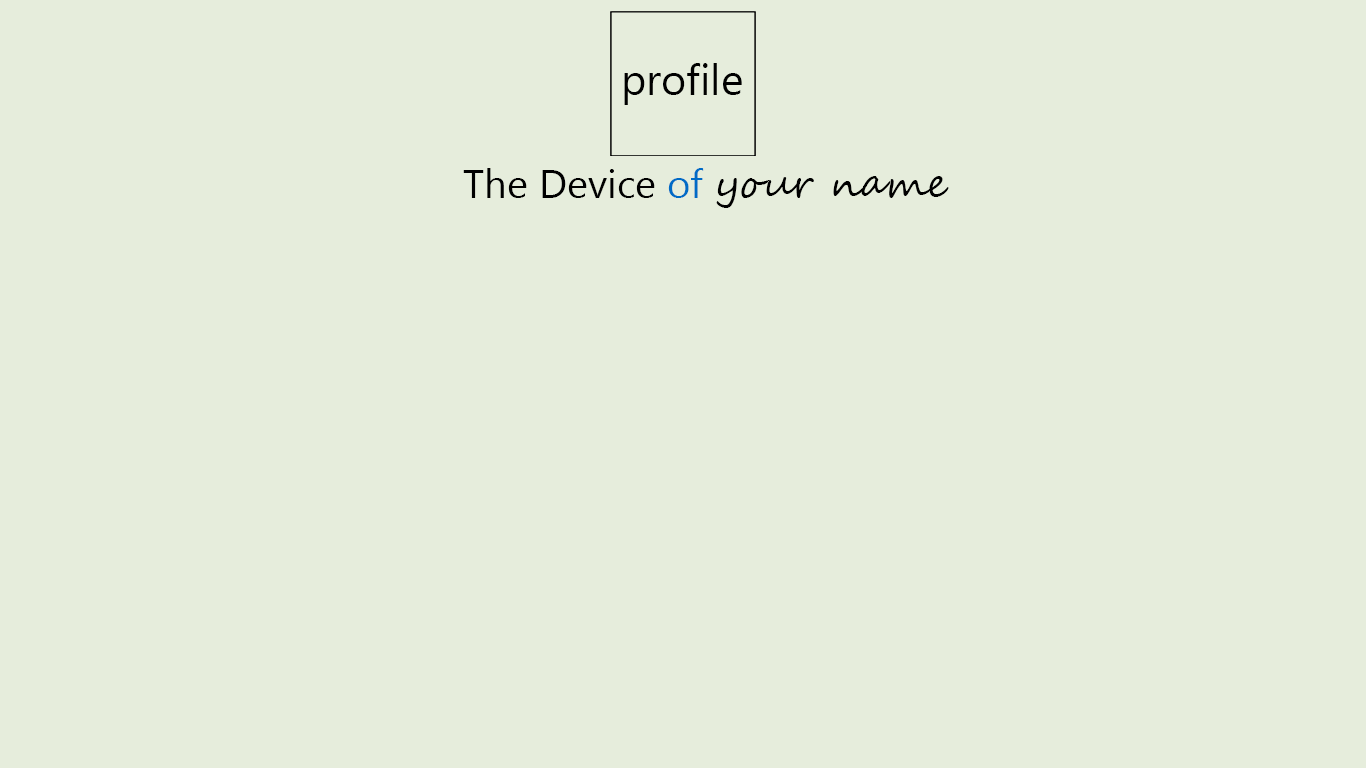
<style>
.page{position:relative;width:1366px;height:768px;background:#e6eddc}
.page>*{position:absolute;margin:0}
.t1{font:40px "SegoeUIHistoric";color:#000000}
.t2{font:40px "SegoeUI";color:#006bc6}
.t3{font:40px "SegoeScript";color:#000000}
</style>
<div class="page">
<p class="t1" style="left:463px;top:168px;width:486px;height:40px">The Device <span class="t2">of </span><span class="t3">your name</span></p>
</div>
